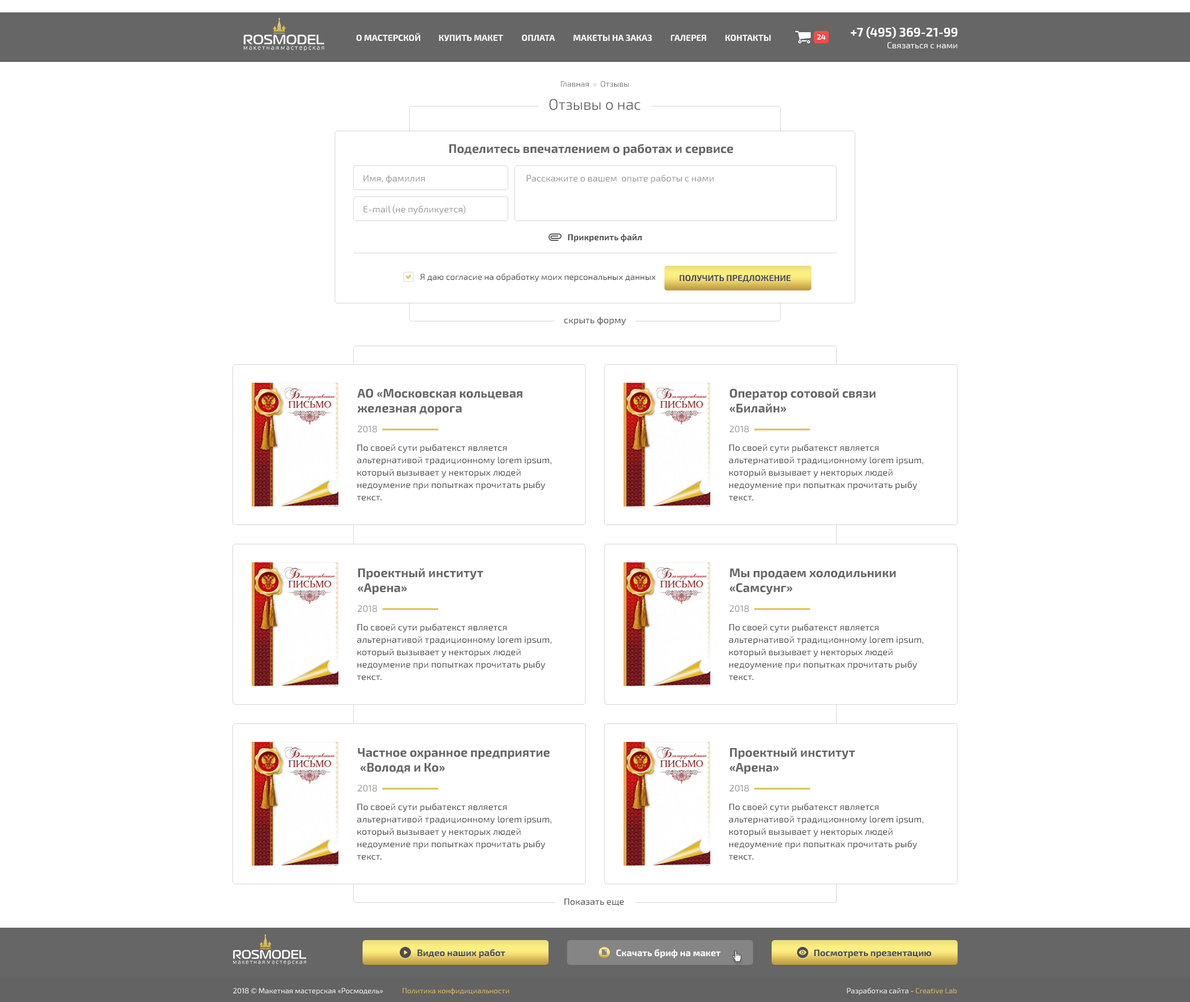
<style>
.page{position:relative;width:1190px;height:1002px;background:#ffffff}
.page>*{position:absolute;margin:0}
.t1{font:8.1px "Exo2-Light";color:#4d4d4d}
.t2{font:8.1px "Exo2-Light";color:#d1b558}
.t3{font:14.9px "Exo2-Light";color:#4d4d4d}
.t4{font:12.4px "Exo2-Bold";color:#666666}
.t5{font:9.3px "Exo2-Regular";color:#999999}
.t6{font:8.7px "Exo2-Bold";color:#4d4d4d}
.t7{font:8.7px "Exo2-Regular";color:#4d4d4d}
.t8{font:8.7px "Exo2-Bold";color:#4d4d4d;text-transform:uppercase}
.t9{font:9.3px "Exo2-Regular";color:#4d4d4d}
.t10{font:9.3px/12.4px "Exo2-Regular";color:#4d4d4d}
</style>
<div class="page">
<p class="t1" style="left:561px;top:81px;width:68px;height:6px">Главная  <span class="t2">»</span>  Отзывы</p>
<p class="t3" style="left:549px;top:99px;width:92px;height:11px">Отзывы о нас</p>
<p class="t4" style="left:449px;top:144px;width:284px;height:12px">Поделитесь впечатлением о работах и сервисе</p>
<p class="t5" style="left:363px;top:175px;width:62px;height:8px">Имя, фамилия</p>
<p class="t5" style="left:526px;top:175px;width:188px;height:8px">Расскажите о вашем  опыте работы с нами</p>
<p class="t5" style="left:363px;top:205px;width:102px;height:9px">E-mail (не публикуется)</p>
<p class="t6" style="left:568px;top:234px;width:74px;height:8px">Прикрепить файл</p>
<p class="t7" style="left:420px;top:273px;width:235px;height:9px">Я даю согласие на обработку моих персональных данных</p>
<p class="t8" style="left:679px;top:275px;width:112px;height:8px">Получить предложение</p>
<p class="t9" style="left:564px;top:317px;width:62px;height:8px">скрыть форму</p>
<p class="t4" style="left:357px;top:388px;width:165px;height:27px">АО «Московская кольцевая <br>железная дорога</p>
<p class="t4" style="left:729px;top:388px;width:146px;height:25px">Оператор сотовой связи<br>«Билайн»</p>
<p class="t5" style="left:357px;top:426px;width:20px;height:7px">2018</p>
<p class="t5" style="left:729px;top:426px;width:19px;height:7px">2018</p>
<p class="t10" style="left:357px;top:444px;width:194px;height:57px">По своей сути рыбатекст является альтернативой традиционному lorem ipsum, который вызывает у некторых людей недоумение при попытках прочитать рыбу текст. <br>В отличии от lorem ipsum, текст рыба на русском языке наполнит любой макет непонятным смыслом и придаст неповторимый колорит.</p>
<p class="t10" style="left:729px;top:444px;width:194px;height:57px">По своей сути рыбатекст является альтернативой традиционному lorem ipsum, который вызывает у некторых людей недоумение при попытках прочитать рыбу текст. <br>В отличии от lorem ipsum, текст рыба на русском языке наполнит любой макет непонятным смыслом и придаст неповторимый колорит.</p>
<p class="t4" style="left:357px;top:568px;width:126px;height:27px">Проектный институт<br>«Арена»</p>
<p class="t4" style="left:729px;top:569px;width:166px;height:26px">Мы продаем холодильники<br>«Самсунг»</p>
<p class="t5" style="left:357px;top:605px;width:20px;height:8px">2018</p>
<p class="t5" style="left:729px;top:605px;width:19px;height:8px">2018</p>
<p class="t10" style="left:357px;top:624px;width:194px;height:57px">По своей сути рыбатекст является альтернативой традиционному lorem ipsum, который вызывает у некторых людей недоумение при попытках прочитать рыбу текст. <br>В отличии от lorem ipsum, текст рыба на русском языке наполнит любой макет непонятным смыслом и придаст неповторимый колорит.</p>
<p class="t10" style="left:729px;top:624px;width:194px;height:57px">По своей сути рыбатекст является альтернативой традиционному lorem ipsum, который вызывает у некторых людей недоумение при попытках прочитать рыбу текст. <br>В отличии от lorem ipsum, текст рыба на русском языке наполнит любой макет непонятным смыслом и придаст неповторимый колорит.</p>
<p class="t4" style="left:357px;top:748px;width:193px;height:26px">Частное охранное предприятие<br> «Володя и Ко»</p>
<p class="t4" style="left:729px;top:748px;width:126px;height:26px">Проектный институт<br>«Арена»</p>
<p class="t5" style="left:357px;top:785px;width:20px;height:7px">2018</p>
<p class="t5" style="left:729px;top:785px;width:19px;height:7px">2018</p>
<p class="t10" style="left:357px;top:804px;width:194px;height:57px">По своей сути рыбатекст является альтернативой традиционному lorem ipsum, который вызывает у некторых людей недоумение при попытках прочитать рыбу текст. <br>В отличии от lorem ipsum, текст рыба на русском языке наполнит любой макет непонятным смыслом и придаст неповторимый колорит.</p>
<p class="t10" style="left:729px;top:804px;width:194px;height:57px">По своей сути рыбатекст является альтернативой традиционному lorem ipsum, который вызывает у некторых людей недоумение при попытках прочитать рыбу текст. <br>В отличии от lorem ipsum, текст рыба на русском языке наполнит любой макет непонятным смыслом и придаст неповторимый колорит.</p>
<p class="t9" style="left:564px;top:898px;width:60px;height:9px">Показать еще</p>
</div>
